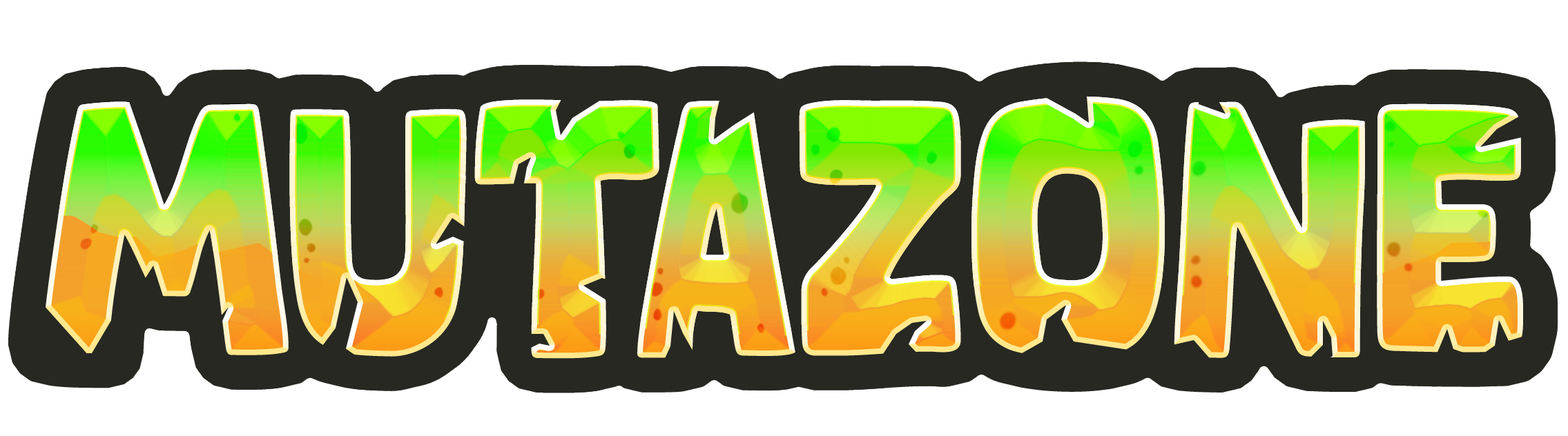
<style>
.page{position:relative;width:1568px;height:436px;background:#ffffff}
.page>*{position:absolute;margin:0}
.t1{font:341.6px "Ourland";scale:0.84 1}
</style>
<div class="page">
<p class="t1" style="left:43px;top:96px;width:1480px;height:263px">MUTAZONE</p>
<p class="t1" style="left:43px;top:96px;width:1480px;height:263px">MUTAZONE</p>
<p class="t1" style="left:43px;top:96px;width:1480px;height:263px">MUTAZONE</p>
<p class="t1" style="left:43px;top:96px;width:1480px;height:263px">MUTAZONE</p>
</div>
